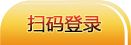
<style>
.page{position:relative;width:131px;height:45px}
.page>*{position:absolute;margin:0}
.t1{font:18px "MicrosoftYaHei";font-weight:bold}
</style>
<div class="page">
<p class="t1" style="left:27px;top:15px;width:75px;height:18px">扫码登录</p>
</div>
